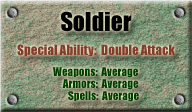
<style>
.page{position:relative;width:192px;height:112px}
.page>*{position:absolute;margin:0}
.t1{font:24px "Impact";color:#000000}
.t2{font:13px "Impact";color:#853c2f}
.t3{font:11px "Impact";color:#003e00}
</style>
<div class="page">
<p class="t1" style="left:61px;top:11px;width:71px;height:21px">Soldier</p>
<p class="t2" style="left:17px;top:44px;width:158px;height:13px">Special Ability:  Double Attack</p>
<p class="t3" style="left:53px;top:67px;width:85px;height:11px">Weapons:  Average</p>
<p class="t3" style="left:62px;top:79px;width:77px;height:11px">Armors:  Average</p>
<p class="t3" style="left:68px;top:91px;width:71px;height:11px">Spells:  Average</p>
</div>
